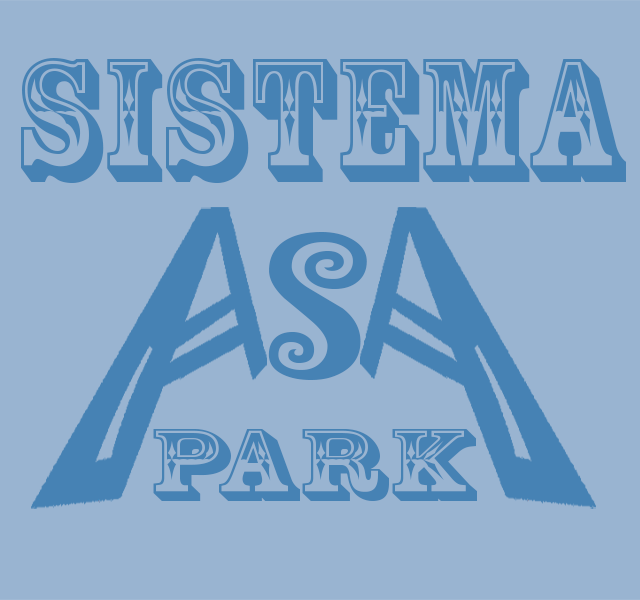
<style>
.page{position:relative;width:640px;height:600px;background:#99b4d1}
.page>*{position:absolute;margin:0}
.t1{font:163.7px "RosewoodStd-Regular";letter-spacing:0.02em;color:#4682b4;scale:0.96 1}
.t2{font:166.1px "Jokerman-Regular";letter-spacing:0.02em;color:#4682b4;scale:1.14 1}
.t3{font:95.4px "RosewoodStd-Regular";letter-spacing:0.02em;color:#4682b4;scale:1.39 1}
</style>
<div class="page">
<p class="t1" style="left:21px;top:58px;width:605px;height:125px">SISTEMA</p>
<p class="t2" style="left:268px;top:232px;width:99px;height:148px">S</p>
<p class="t3" style="left:153px;top:429px;width:324px;height:72px">PARK</p>
</div>
